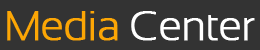
<style>
.page{position:relative;width:260px;height:50px;background:#333333}
.page>*{position:absolute;margin:0}
.t1{font:41.7px "SansationLight";letter-spacing:-0.025em;color:#ffffff;font-weight:bold}
.t2{font:41.7px "SansationLight";letter-spacing:-0.025em;color:#fca605;font-weight:bold}
</style>
<div class="page">
<p class="t1" style="left:7px;top:11px;width:248px;height:30px"><span class="t2">Media </span>Center</p>
</div>
